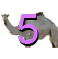
<style>
.page{position:relative;width:58px;height:59px;background:#ffffff}
.page>*{position:absolute;margin:0}
.t1{font:41.7px "ArialMT";color:#d576f8}
.t2{font:41.7px "ArialMT"}
</style>
<div class="page">
<p class="t1" style="left:17px;top:14px;width:21px;height:30px">5</p>
<p class="t2" style="left:18px;top:16px;width:21px;height:30px">5</p>
</div>
